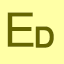
<style>
.page{position:relative;width:64px;height:64px;background:#ffffa6}
.page>*{position:absolute;margin:0}
.t1{font:48px "LingoesUnicode";color:#646400}
.t2{font:48px "LingoesUnicode";color:#646400;font-weight:bold}
</style>
<div class="page">
<p class="t1" style="left:7px;top:12px;width:27px;height:35px">E</p>
<p class="t2" style="left:35px;top:26px;width:19px;height:22px">D</p>
</div>
